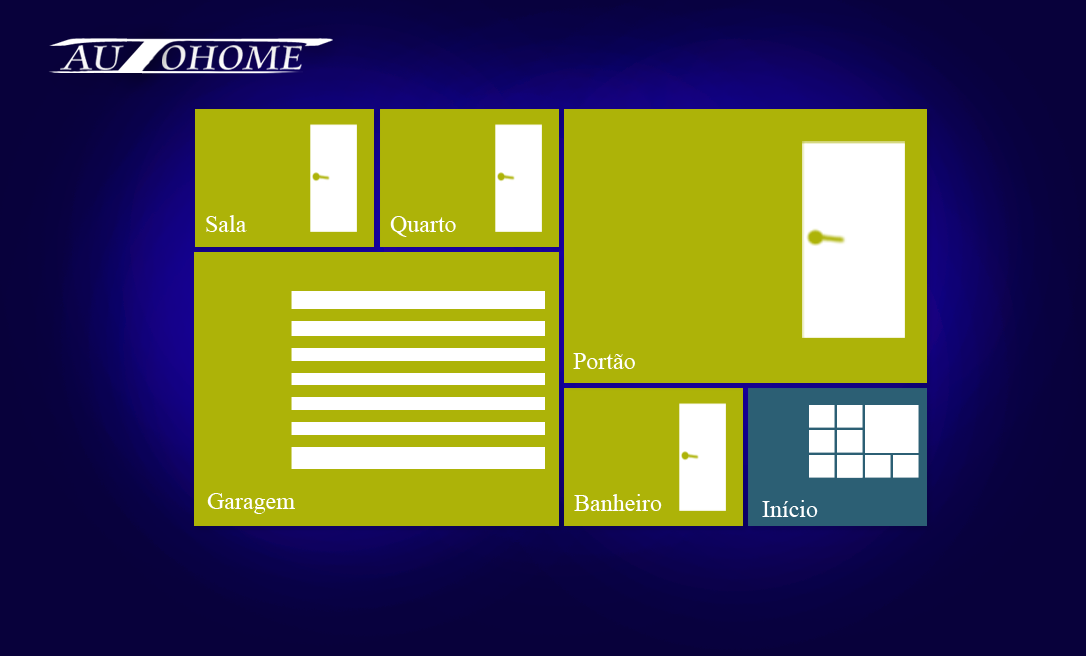
<style>
.page{position:relative;width:1086px;height:656px;background:#adb308}
.page>*{position:absolute;margin:0}
.t1{font:36.4px "CataneoBT-Regular";color:#ffffff;scale:1.13 1}
.t2{font:24px "TimesNewRomanPSMT";color:#ffffff}
</style>
<div class="page">
<p class="t1" style="left:162px;top:45px;width:140px;height:25px">OHOME</p>
<p class="t2" style="left:206px;top:215px;width:41px;height:17px">Sala</p>
<p class="t2" style="left:390px;top:216px;width:66px;height:21px">Quarto</p>
<p class="t2" style="left:573px;top:353px;width:62px;height:16px">Portão</p>
<p class="t2" style="left:207px;top:493px;width:88px;height:21px">Garagem</p>
<p class="t2" style="left:574px;top:494px;width:88px;height:17px">Banheiro</p>
<p class="t2" style="left:762px;top:500px;width:56px;height:17px">Início</p>
</div>
